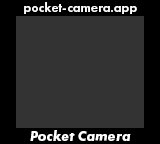
<style>
.page{position:relative;width:160px;height:144px;background:#333333}
.page>*{position:absolute;margin:0}
.t1{font:13px "FuturaPT-Demi";letter-spacing:0.02em;color:#ffffff}
.t2{font:14px "FuturaPT-BoldObl";letter-spacing:0.02em;color:#ffffff}
</style>
<div class="page">
<p class="t1" style="left:24px;top:2px;width:113px;height:13px">pocket-camera.app</p>
<p class="t2" style="left:30px;top:130px;width:101px;height:11px">Pocket Camera</p>
</div>
